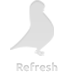
<style>
.page{position:relative;width:70px;height:73px;background:#ffffff}
.page>*{position:absolute;margin:0}
.t1{font:11.3px "Ubuntu-Bold";color:#dadada}
</style>
<div class="page">
<p class="t1" style="left:16px;top:62px;width:42px;height:10px">Refresh</p>
</div>
